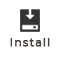
<style>
.page{position:relative;width:60px;height:60px;background:#ffffff}
.page>*{position:absolute;margin:0}
.t1{font:10.7px "Montserrat-Regular";letter-spacing:0.1em;color:#463f3b;font-weight:bold}
</style>
<div class="page">
<p class="t1" style="left:10px;top:38px;width:40px;height:9px">Install</p>
</div>
